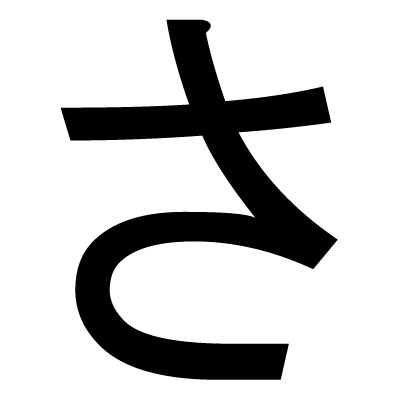
<style>
.page{position:relative;width:400px;height:400px;background:#ffffff}
.page>*{position:absolute;margin:0}
.t1{font:416.7px "MS-PGothic";color:#000000}
</style>
<div class="page">
<p class="t1" style="left:60px;top:19px;width:278px;height:361px">さ</p>
</div>
